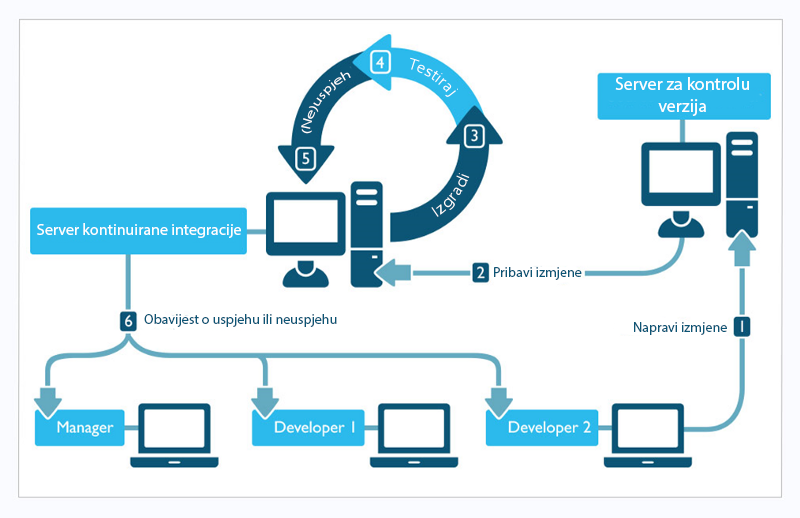
<style>
.page{position:relative;width:800px;height:518px;background:#ffffff}
.page>*{position:absolute;margin:0}
.t1{font:18px "MyriadPro-Regular";color:#fefefe}
.t2{font:16px "MyriadPro-Regular";color:#ffffff}
.t3{font:16px "MyriadPro-Regular";color:#fefefe}
.t4{font:14px "MyriadPro-Regular";color:#0c5575}
</style>
<div class="page">
<p class="t1" style="left:615px;top:77px;width:134px;height:39px;text-align:center">Server za kontrolu verzija</p>
<p class="t2" style="left:431px;top:173px;width:39px;height:44px;rotate:-52deg">Izgradi</p>
<p class="t3" style="left:37px;top:223px;width:204px;height:15px">Server kontinuirane integracije</p>
<p class="t4" style="left:494px;top:267px;width:88px;height:13px">Pribavi izmjene</p>
<p class="t4" style="left:144px;top:314px;width:193px;height:13px">Obavijest o uspjehu ili neuspjehu</p>
<p class="t4" style="left:634px;top:322px;width:93px;height:13px">Napravi izmjene</p>
</div>
